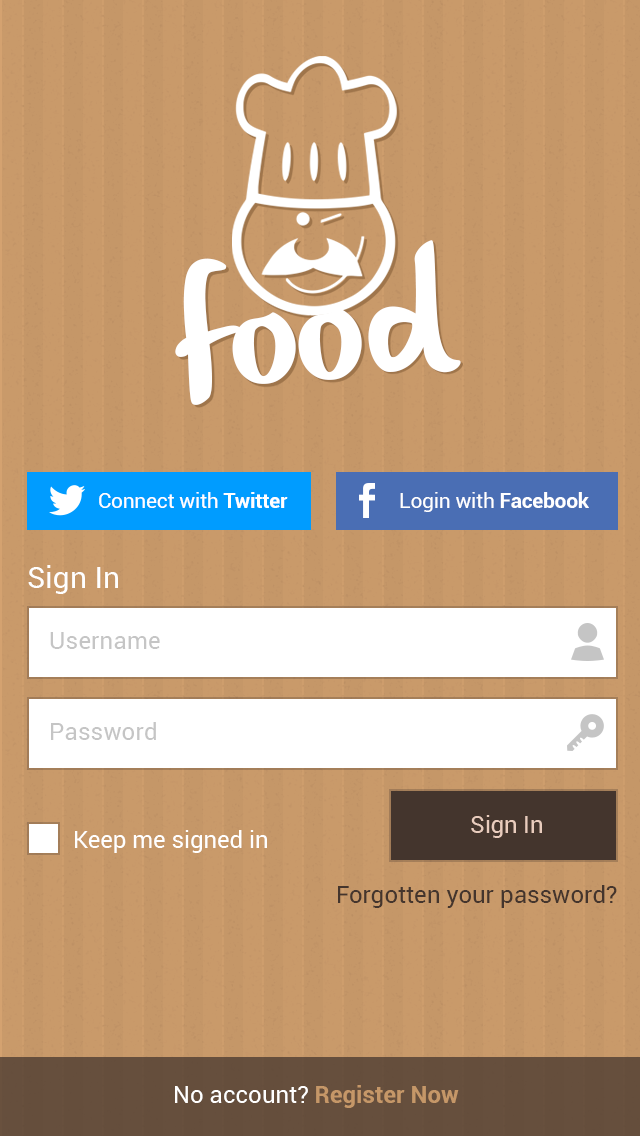
<style>
.page{position:relative;width:640px;height:1136px;background:#c99a6a}
.page>*{position:absolute;margin:0}
.t1{font:173.3px "olivier";color:#ffffff}
.t2{font:21.1px "Roboto-Regular";letter-spacing:-0.015em;color:#ffffff}
.t3{font:21.1px "Roboto-Bold";letter-spacing:-0.015em;color:#ffffff}
.t4{font:30px "Roboto-Regular";color:#ffffff}
.t5{font:24px "Roboto-Regular";color:#c5c5c5}
.t6{font:24px "Roboto-Regular";letter-spacing:-0.015em;color:#e9cdbe}
.t7{font:24px "Roboto-Regular";color:#ffffff}
.t8{font:24px "Roboto-Regular";color:#44352d}
.t9{font:24px "Roboto-Bold";color:#c59768}
</style>
<div class="page">
<p class="t1" style="left:175px;top:240px;width:286px;height:165px;rotate:-4deg">food</p>
<p class="t2" style="left:99px;top:492px;width:189px;height:16px">Connect with <span class="t3">Twitter</span></p>
<p class="t2" style="left:400px;top:492px;width:189px;height:20px">Login with <span class="t3">Facebook</span></p>
<p class="t4" style="left:28px;top:565px;width:90px;height:29px">Sign In</p>
<p class="t5" style="left:50px;top:632px;width:110px;height:17px">Username</p>
<p class="t5" style="left:51px;top:722px;width:105px;height:18px">Password</p>
<p class="t6" style="left:471px;top:815px;width:71px;height:23px">Sign In</p>
<p class="t7" style="left:75px;top:830px;width:192px;height:23px">Keep me signed in</p>
<p class="t8" style="left:338px;top:885px;width:279px;height:23px">Forgotten your password?</p>
<p class="t9" style="left:175px;top:1085px;width:284px;height:23px"><span class="t7">No account? </span>Register Now</p>
</div>
